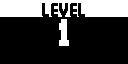
<style>
.page{position:relative;width:128px;height:64px;background:#000000}
.page>*{position:absolute;margin:0}
.t1{font:18px "Big-Apple-3PM";color:#000000}
.t2{font:35px "Big-Apple-3PM";color:#ffffff}
</style>
<div class="page">
<p class="t1" style="left:42px;top:3px;width:43px;height:14px">LEVEL</p>
<p class="t2" style="left:59px;top:19px;width:10px;height:27px">1</p>
</div>
